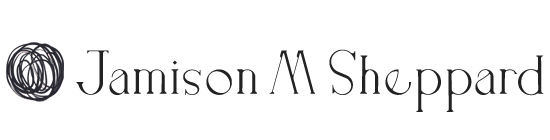
<style>
.page{position:relative;width:550px;height:140px;background:#ffffff}
.page>*{position:absolute;margin:0}
.t1{font:64px "Doppelganger-Display";letter-spacing:0.05em;color:#222222}
</style>
<div class="page">
<p class="t1" style="left:76px;top:49px;width:468px;height:63px">Jamison M Sheppard</p>
</div>
